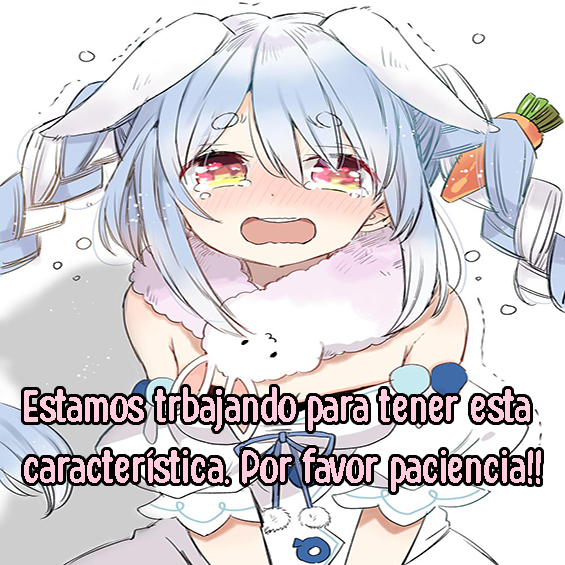
<style>
.page{position:relative;width:565px;height:565px;background:#ffffff}
.page>*{position:absolute;margin:0}
.t1{font:50.8px "HoneyNotes-Regular";color:#ffcddd}
</style>
<div class="page">
<p class="t1" style="left:24px;top:387px;width:517px;height:105px;text-align:center">Estamos trbajando para tener esta <br>característica. Por favor paciencia!!</p>
</div>
